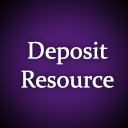
<style>
.page{position:relative;width:128px;height:128px}
.page>*{position:absolute;margin:0}
.t1{font:24px "Constantia";color:#ffffff}
</style>
<div class="page">
<p class="t1" style="left:21px;top:41px;width:93px;height:47px;text-align:center">Deposit<br>Resource</p>
</div>
